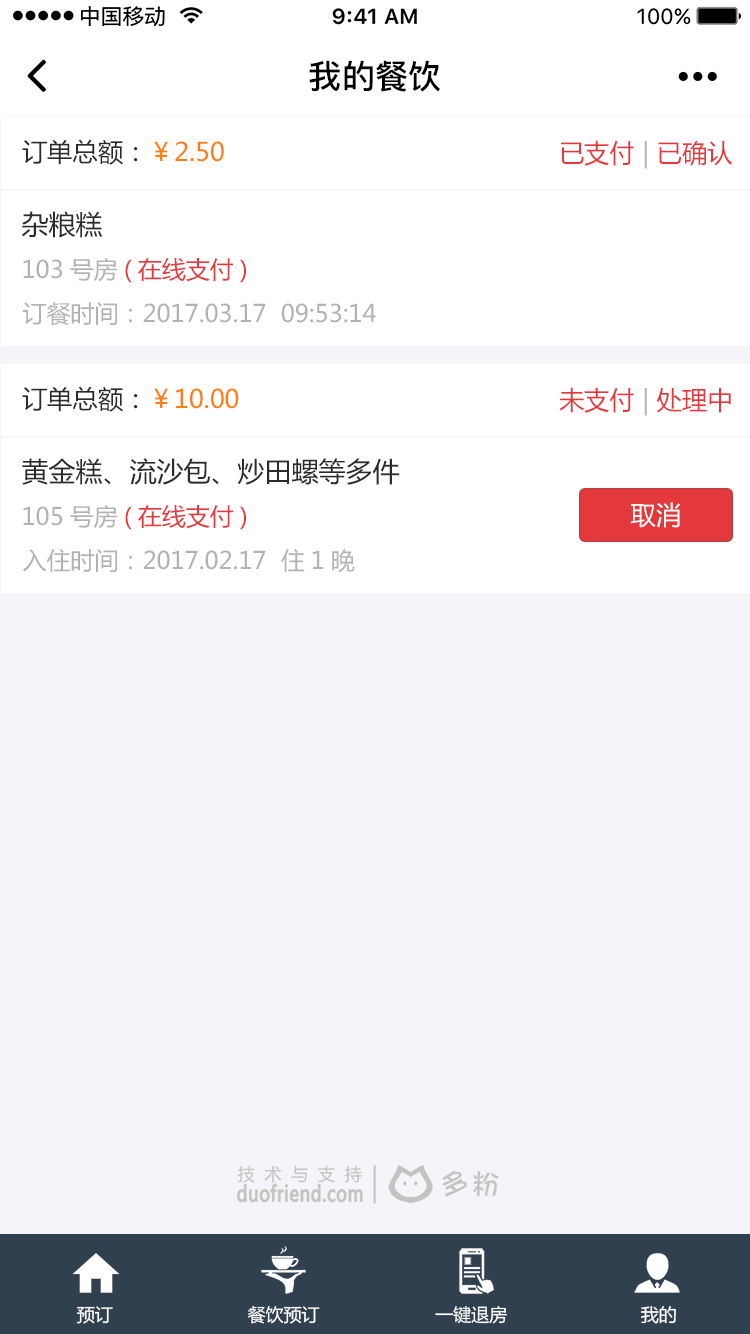
<style>
.page{position:relative;width:750px;height:1334px;background:#f5f5f9}
.page>*{position:absolute;margin:0}
.t1{font:33.2px "PingFang-SC-Bold";color:#000000}
.t2{font:25.4px "MicrosoftYaHei";color:#2b2b2b}
.t3{font:25.4px "MicrosoftYaHei";color:#ff7d13}
.t4{font:25.4px "MicrosoftYaHei";color:#e4393c}
.t5{font:25.4px "MicrosoftYaHei";color:#b2b2b2}
.t6{font:27px "MicrosoftYaHei";color:#2b2b2b}
.t7{font:24px "MicrosoftYaHei";color:#e4393c}
.t8{font:24px "MicrosoftYaHei";color:#b2b2b2}
.t9{font:25.4px "MicrosoftYaHei";color:#ffffff}
.t10{font:18px "MicrosoftYaHei";color:#ffffff}
</style>
<div class="page">
<p class="t1" style="left:309px;top:60px;width:132px;height:32px">我的餐饮</p>
<p class="t2" style="left:22px;top:139px;width:202px;height:26px">订单总额：<span class="t3">￥2.50</span></p>
<p class="t4" style="left:561px;top:140px;width:172px;height:29px">已支付 <span class="t5">| </span>已确认</p>
<p class="t6" style="left:21px;top:211px;width:82px;height:27px">杂粮糕</p>
<p class="t7" style="left:23px;top:258px;width:223px;height:25px"><span class="t8">103号房</span>(在线支付)</p>
<p class="t8" style="left:22px;top:302px;width:354px;height:24px">订餐时间：2017.03.17  09:53:14</p>
<p class="t3" style="left:22px;top:386px;width:217px;height:26px"><span class="t2">订单总额：</span>￥10.00</p>
<p class="t4" style="left:559px;top:387px;width:172px;height:29px">未支付 <span class="t5">| </span>处理中</p>
<p class="t6" style="left:22px;top:458px;width:378px;height:27px">黄金糕、流沙包、炒田螺等多件</p>
<p class="t7" style="left:23px;top:505px;width:223px;height:25px"><span class="t8">105号房</span>(在线支付)</p>
<p class="t9" style="left:630px;top:502px;width:50px;height:26px">取消</p>
<p class="t8" style="left:23px;top:549px;width:332px;height:24px">入住时间：2017.02.17  住1晚</p>
<p class="t10" style="left:77px;top:1306px;width:36px;height:18px">预订</p>
<p class="t10" style="left:247px;top:1306px;width:73px;height:18px">餐饮预订</p>
<p class="t10" style="left:435px;top:1306px;width:72px;height:18px">一键退房</p>
<p class="t10" style="left:641px;top:1305px;width:35px;height:19px">我的</p>
</div>
